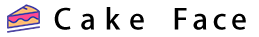
<style>
.page{position:relative;width:259px;height:37px;background:#ffffff}
.page>*{position:absolute;margin:0}
.t1{font:28px "AdobeHeitiStd-Regular";color:#000000;scale:1.05 1}
</style>
<div class="page">
<p class="t1" style="left:54px;top:7px;width:192px;height:23px">C  a  k  e      F a c e</p>
</div>
